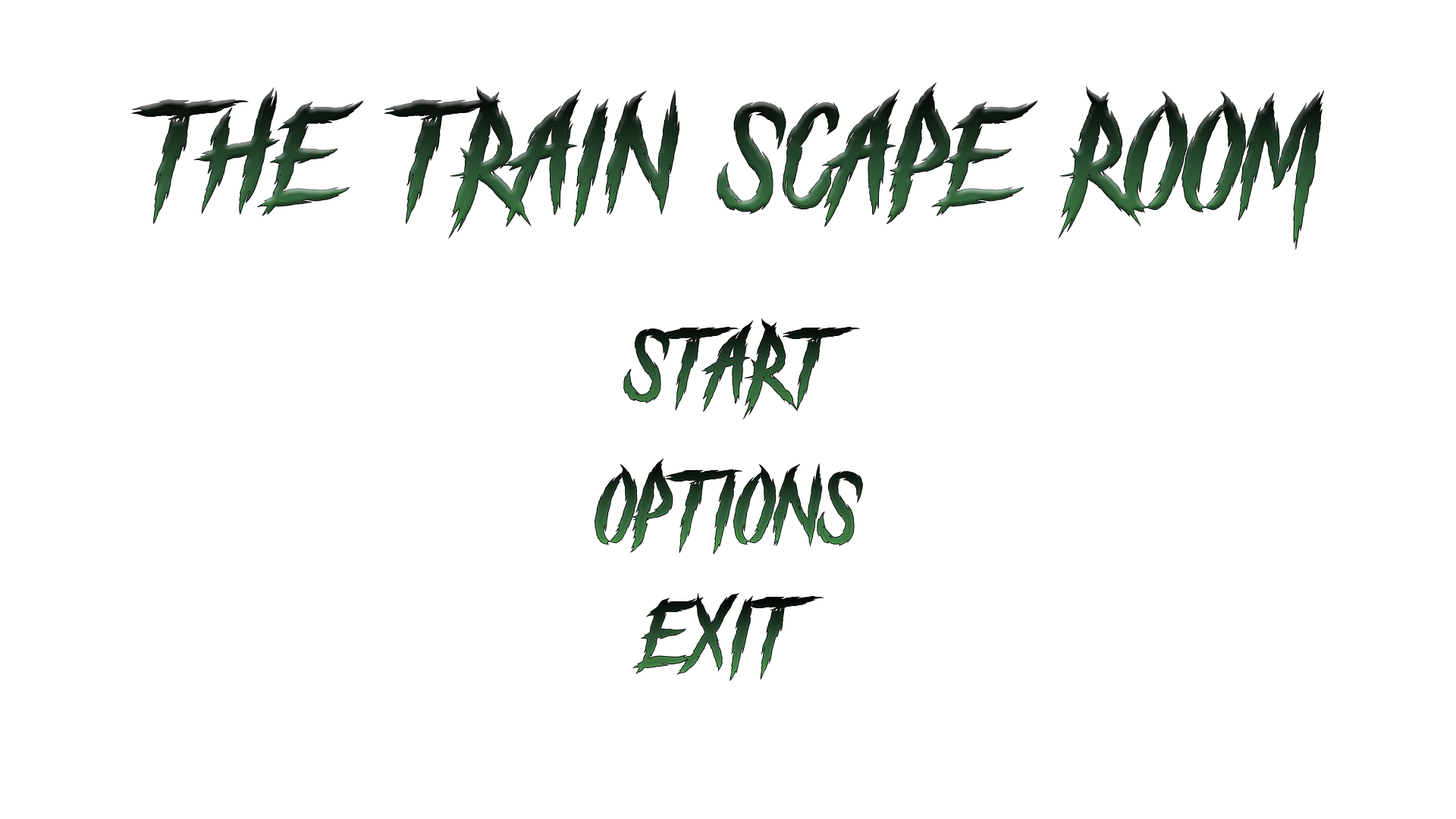
<style>
.page{position:relative;width:1456px;height:819px;background:#ffffff}
.page>*{position:absolute;margin:0}
.t1{font:142.2px "TheBlackFestival"}
.t2{font:94.8px "TheBlackFestival"}
</style>
<div class="page">
<p class="t1" style="left:131px;top:83px;width:1193px;height:167px">THE TRAIN SCAPE ROOM</p>
<p class="t2" style="left:623px;top:318px;width:238px;height:102px">START</p>
<p class="t2" style="left:594px;top:458px;width:269px;height:96px">OPTIONS</p>
<p class="t2" style="left:632px;top:593px;width:192px;height:88px">EXIT</p>
</div>
